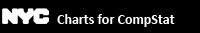
<style>
.page{position:relative;width:200px;height:33px;background:#000000}
.page>*{position:absolute;margin:0}
.t1{font:14px "Calibri-Bold";color:#ffffff}
</style>
<div class="page">
<p class="t1" style="left:57px;top:14px;width:118px;height:13px">Charts for CompStat</p>
</div>
